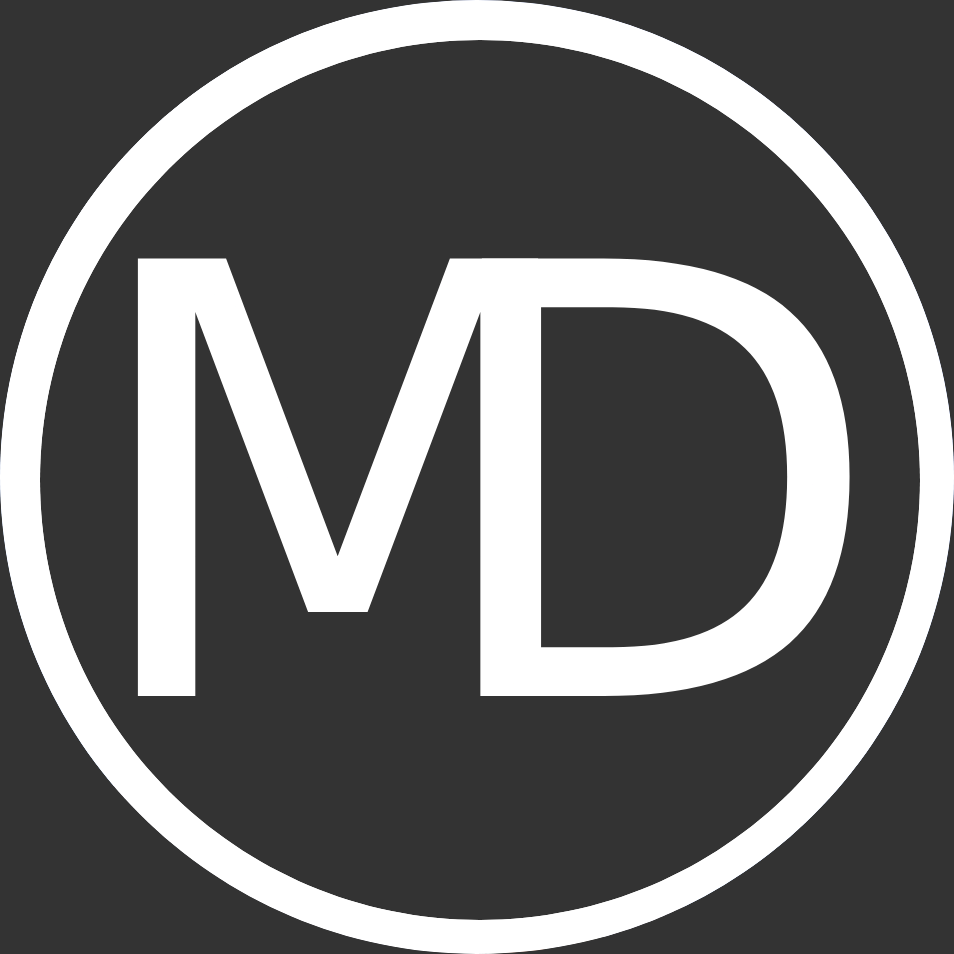
<style>
.page{position:relative;width:954px;height:954px;background:#333333}
.page>*{position:absolute;margin:0}
.t1{font:600px "DejaVuSans";color:#ffffff}
</style>
<div class="page">
<p class="t1" style="left:137px;top:258px;width:402px;height:438px">M</p>
<p class="t1" style="left:481px;top:258px;width:369px;height:438px">D</p>
</div>
